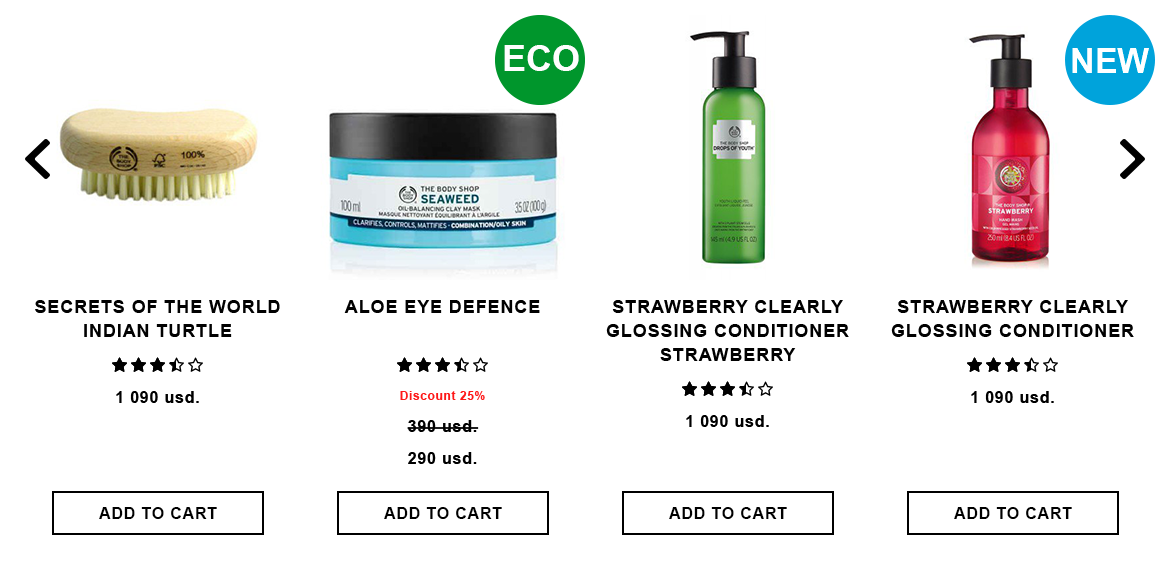
<style>
.page{position:relative;width:1170px;height:570px;background:#ffffff}
.page>*{position:absolute;margin:0}
.t1{font:18px/24px "Arial-BoldMT";letter-spacing:0.05em;color:#010101;text-transform:uppercase}
.t2{font:18px "Arial-BoldMT";letter-spacing:0.05em;color:#010101;text-transform:uppercase}
.t3{font:16px "Arial-BoldMT";letter-spacing:0.05em;color:#000000;text-transform:uppercase}
.t4{font:16px "Arial-BoldMT";letter-spacing:0.05em;color:#000000}
.t5{font:16px/32px "Arial-BoldMT";letter-spacing:0.05em;color:#000000}
.t6{font:12px/32px "Arial-BoldMT";letter-spacing:0.05em;color:#fe1919}
</style>
<div class="page">
<p class="t1" style="left:35px;top:300px;width:245px;height:37px;text-align:center">Secrets of the World Indian Turtle Massager</p>
<p class="t2" style="left:344px;top:300px;width:196px;height:13px">Aloe Eye Defence</p>
<p class="t1" style="left:606px;top:300px;width:243px;height:61px;text-align:center">Strawberry Clearly Glossing Conditioner Strawberry</p>
<p class="t1" style="left:891px;top:300px;width:243px;height:37px;text-align:center">Strawberry Clearly Glossing Conditioner Strawberry</p>
<p class="t3" style="left:116px;top:391px;width:83px;height:12px">1 090 <span class="t4">usd.</span></p>
<p class="t5" style="left:400px;top:391px;width:85px;height:73px;text-align:center"><span class="t6">Discount 25%<br></span>390 usd.<br>290 usd.</p>
<p class="t3" style="left:971px;top:391px;width:83px;height:12px">1 090 <span class="t4">usd.</span></p>
<p class="t3" style="left:686px;top:415px;width:83px;height:12px">1 090 <span class="t4">usd.</span></p>
<p class="t3" style="left:99px;top:507px;width:118px;height:12px">add to cart</p>
<p class="t3" style="left:384px;top:507px;width:118px;height:12px">add to cart</p>
<p class="t3" style="left:669px;top:507px;width:118px;height:12px">add to cart</p>
<p class="t3" style="left:954px;top:507px;width:118px;height:12px">add to cart</p>
</div>
